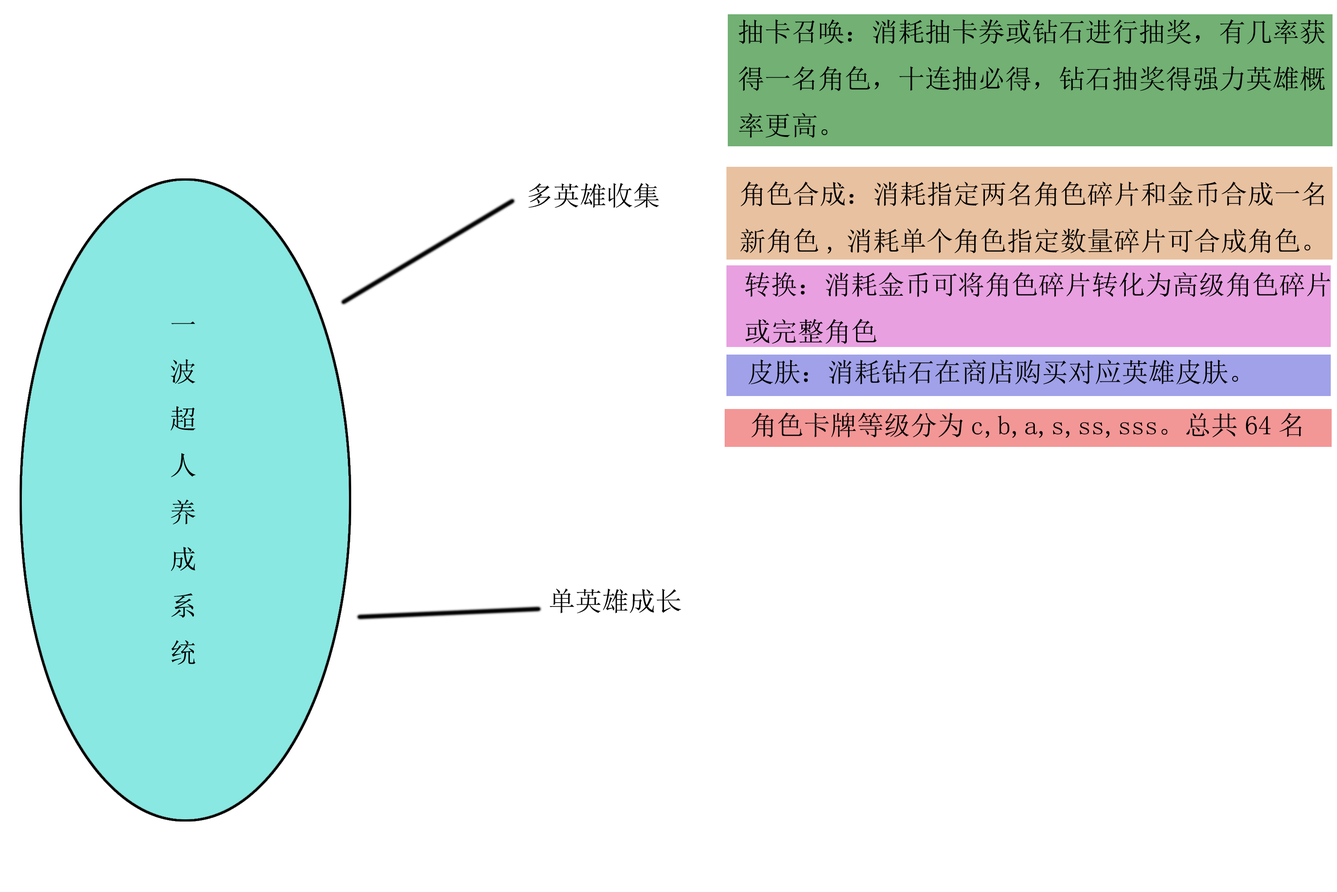
<style>
.page{position:relative;width:1337px;height:892px;background:#ffffff}
.page>*{position:absolute;margin:0}
.t1{font:26.7px "SimSun";color:#000000}
</style>
<div class="page">
<p class="t1" style="left:739px;top:19px;width:586px;height:119px">抽卡召唤：消耗抽卡券或钻石进行抽奖，有几率获<br>得一名角色，十连抽必得，钻石抽奖得强力英雄概<br>率更高。</p>
<p class="t1" style="left:528px;top:183px;width:131px;height:25px">多英雄收集</p>
<p class="t1" style="left:740px;top:181px;width:585px;height:73px">角色合成：消耗指定两名角色碎片和金币合成一名<br>新角色,消耗单个角色指定数量碎片可合成角色。</p>
<p class="t1" style="left:745px;top:271px;width:586px;height:73px">转换：消耗金币可将角色碎片转化为高级角色碎片<br>或完整角色</p>
<p class="t1" style="left:171px;top:321px;width:25px;height:344px">一<br>波<br>超<br>人<br>养<br>成<br>系<br>统</p>
<p class="t1" style="left:749px;top:359px;width:489px;height:25px">皮肤：消耗钻石在商店购买对应英雄皮肤。</p>
<p class="t1" style="left:752px;top:412px;width:550px;height:26px">角色卡牌等级分为c,b,a,s,ss,sss。总共64名</p>
<p class="t1" style="left:550px;top:588px;width:131px;height:25px">单英雄成长</p>
</div>
